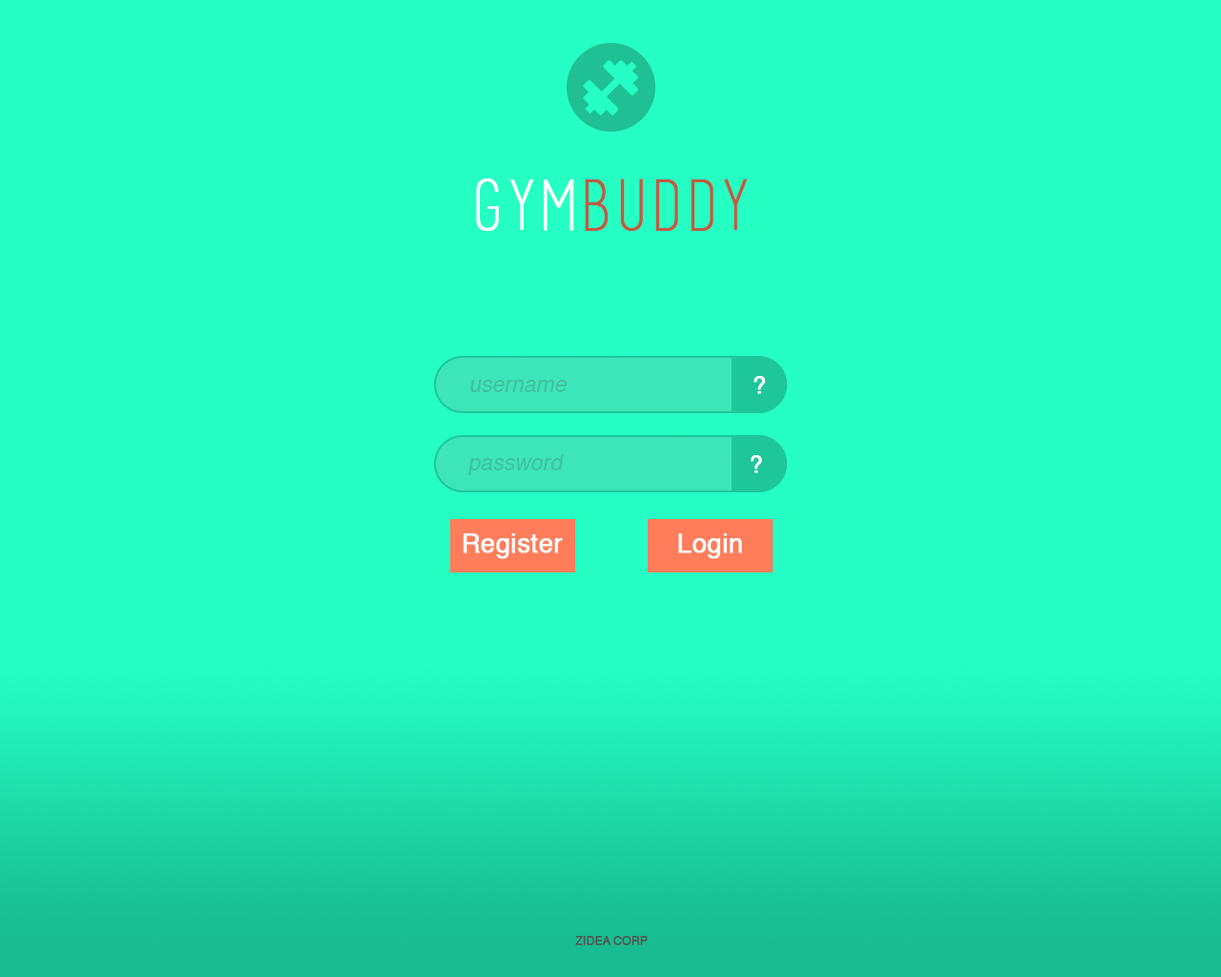
<style>
.page{position:relative;width:1221px;height:977px;background:#25ffc4}
.page>*{position:absolute;margin:0}
.t1{font:68.7px "basictitlefont";color:#bb5d43;font-weight:bold}
.t2{font:68.7px "basictitlefont";color:#ffffff;font-weight:bold}
.t3{font:23.8px "Helvetica";color:#ffffff;font-weight:bold}
.t4{font:21.9px "Helvetica";color:#42c19d;font-style:italic}
.t5{font:23.8px "Helvetica";color:#fefefe;font-weight:bold}
.t6{font:25.8px "Helvetica";color:#ffffff;font-weight:bold}
.t7{font:11.4px "Helvetica";color:#505050;font-weight:bold}
</style>
<div class="page">
<p class="t1" style="left:476px;top:178px;width:271px;height:53px"><span class="t2">GYM</span>BUDDY</p>
<p class="t3" style="left:754px;top:376px;width:11px;height:18px">?</p>
<p class="t4" style="left:470px;top:380px;width:97px;height:12px">username</p>
<p class="t4" style="left:468px;top:454px;width:96px;height:21px">password</p>
<p class="t5" style="left:751px;top:455px;width:11px;height:18px">?</p>
<p class="t6" style="left:463px;top:533px;width:100px;height:26px">Register</p>
<p class="t6" style="left:678px;top:533px;width:64px;height:26px">Login</p>
<p class="t7" style="left:575px;top:936px;width:73px;height:9px">ZIDEA CORP</p>
</div>
